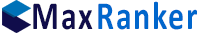
<style>
.page{position:relative;width:200px;height:33px;background:#ffffff}
.page>*{position:absolute;margin:0}
.t1{font:40px "Calibri-Bold";letter-spacing:0.05em;color:#100d4b;scale:0.8 1}
.t2{font:40px "Calibri-Bold";letter-spacing:0.05em;color:#0066cc;scale:0.8 1}
</style>
<div class="page">
<p class="t1" style="left:33px;top:3px;width:60px;height:27px">Max</p>
<p class="t2" style="left:98px;top:1px;width:99px;height:29px">Ranker</p>
</div>
